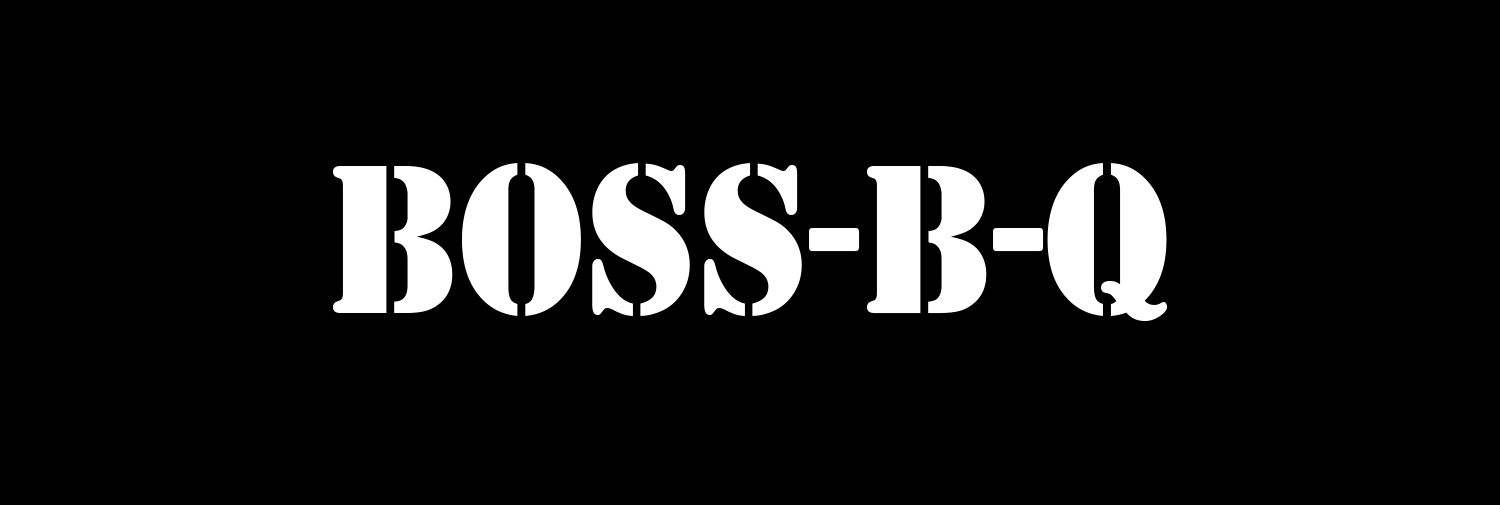
<style>
.page{position:relative;width:1500px;height:505px;background:#000000}
.page>*{position:absolute;margin:0}
.t1{font:220px "Stencil";color:#ffffff;scale:0.91 1}
</style>
<div class="page">
<p class="t1" style="left:333px;top:163px;width:835px;height:158px">BOSS-B-Q</p>
</div>
